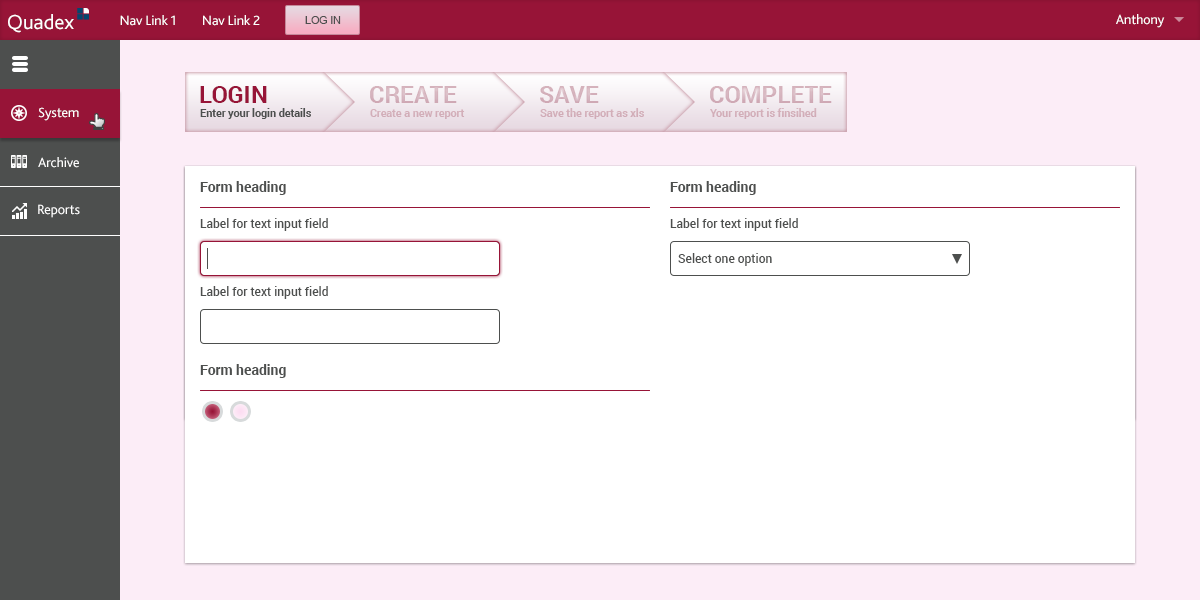
<style>
.page{position:relative;width:1200px;height:600px;background:#ffffff}
.page>*{position:absolute;margin:0}
.t1{font:21.1px "Bliss2";letter-spacing:-0.01em;color:#ffffff}
.t2{font:14px "Bliss2";letter-spacing:-0.01em;color:#ffffff}
.t3{font:10.5px "ArialMT";color:#4d4f4e}
.t4{font:24px "Roboto-Bold";color:#971437}
.t5{font:24px "Roboto-Bold";color:#d5b2bc}
.t6{font:10.7px "Roboto-Bold";color:#4d4f4e}
.t7{font:10.7px "Roboto-Bold";color:#d3aeb9}
.t8{font:10.7px "Roboto-Bold";color:#d2aeb8}
.t9{font:14px "Roboto-Bold";color:#4d4f4e}
.t10{font:12px "Roboto-Medium";color:#4d4f4e}
</style>
<div class="page">
<p class="t1" style="left:8px;top:14px;width:66px;height:19px">Quadex</p>
<p class="t2" style="left:120px;top:15px;width:55px;height:11px">Nav Link 1</p>
<p class="t2" style="left:203px;top:15px;width:57px;height:11px">Nav Link 2</p>
<p class="t3" style="left:305px;top:16px;width:36px;height:8px">LOG IN</p>
<p class="t2" style="left:1116px;top:14px;width:49px;height:14px">Anthony</p>
<p class="t4" style="left:200px;top:86px;width:67px;height:17px">LOGIN</p>
<p class="t5" style="left:370px;top:86px;width:87px;height:17px">CREATE</p>
<p class="t5" style="left:540px;top:86px;width:59px;height:17px">SAVE</p>
<p class="t5" style="left:710px;top:86px;width:122px;height:17px">COMPLETE</p>
<p class="t2" style="left:38px;top:107px;width:41px;height:14px">System</p>
<p class="t6" style="left:200px;top:108px;width:111px;height:11px">Enter your login details</p>
<p class="t7" style="left:370px;top:109px;width:95px;height:10px">Create a new report</p>
<p class="t8" style="left:540px;top:108px;width:104px;height:11px">Save the report as xls</p>
<p class="t7" style="left:710px;top:108px;width:107px;height:11px">Your report is finsihed</p>
<p class="t2" style="left:38px;top:157px;width:41px;height:11px">Archive</p>
<p class="t9" style="left:200px;top:181px;width:86px;height:14px">Form heading</p>
<p class="t9" style="left:670px;top:181px;width:86px;height:14px">Form heading</p>
<p class="t2" style="left:38px;top:204px;width:42px;height:14px">Reports</p>
<p class="t10" style="left:200px;top:218px;width:128px;height:13px">Label for text input field</p>
<p class="t10" style="left:670px;top:218px;width:128px;height:13px">Label for text input field</p>
<p class="t10" style="left:678px;top:253px;width:94px;height:13px">Select one option</p>
<p class="t10" style="left:200px;top:286px;width:128px;height:13px">Label for text input field</p>
<p class="t9" style="left:200px;top:364px;width:86px;height:14px">Form heading</p>
</div>
